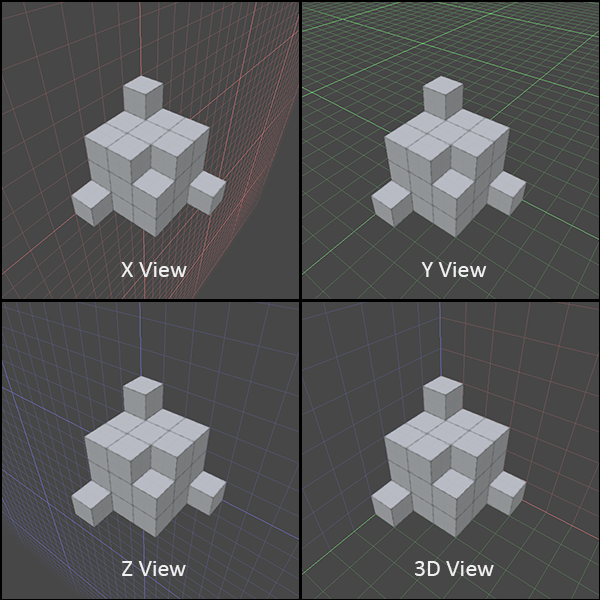
<style>
.page{position:relative;width:600px;height:600px;background:#474747}
.page>*{position:absolute;margin:0}
.t1{font:24px "Calibri";color:#f0f0f0}
</style>
<div class="page">
<p class="t1" style="left:121px;top:262px;width:66px;height:15px">X View</p>
<p class="t1" style="left:421px;top:262px;width:66px;height:15px">Y View</p>
<p class="t1" style="left:122px;top:561px;width:64px;height:15px">Z View</p>
<p class="t1" style="left:415px;top:561px;width:79px;height:15px">3D View</p>
</div>
